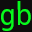
<style>
.page{position:relative;width:32px;height:32px;background:#0e0d0d}
.page>*{position:absolute;margin:0}
.t1{font:32.6px "MyriadPro-Regular";color:#06fa1d;scale:0.86 1}
</style>
<div class="page">
<p class="t1" style="left:1px;top:1px;width:30px;height:30px">gb</p>
</div>
